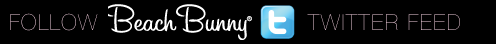
<style>
.page{position:relative;width:496px;height:44px;background:#000000}
.page>*{position:absolute;margin:0}
.t1{font:22px "HelveticaNeue-UltraLight";letter-spacing:0.05em}
.t2{font:22px "HelveticaNeue-UltraLight";letter-spacing:0.075em}
</style>
<div class="page">
<p class="t1" style="left:10px;top:13px;width:88px;height:18px">FOLLOW</p>
<p class="t2" style="left:307px;top:14px;width:153px;height:16px">TWITTER FEED</p>
</div>
